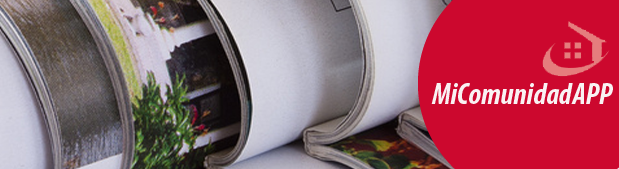
<style>
.page{position:relative;width:619px;height:169px;background:#cc082e}
.page>*{position:absolute;margin:0}
.t1{font:30px "MyriadPro-BoldCondIt";color:#f9f2f3}
</style>
<div class="page">
<p class="t1" style="left:431px;top:83px;width:182px;height:21px">MiComunidadAPP</p>
</div>
